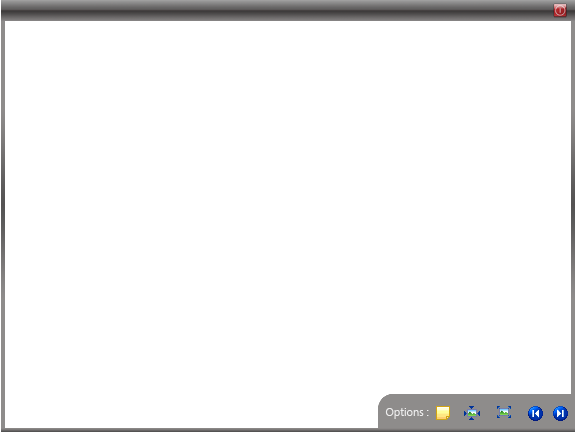
<style>
.page{position:relative;width:576px;height:432px;background:#ffffff}
.page>*{position:absolute;margin:0}
.t1{font:11px "SegoeUI-Regular";color:#eeeeee}
</style>
<div class="page">
<p class="t1" style="left:385px;top:408px;width:44px;height:11px">: Options</p>
</div>
